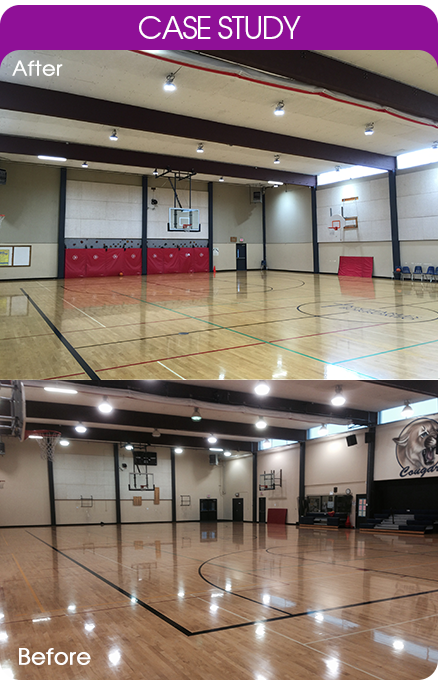
<style>
.page{position:relative;width:440px;height:680px}
.page>*{position:absolute;margin:0}
.t1{font:30px "AvantGarde-Book";letter-spacing:-0.04em;color:#ffffff;text-transform:uppercase}
.t2{font:20.3px "AvantGarde-Book";color:#ffffff;font-weight:bold}
.t3{font:22.3px "AvantGarde-Book";color:#ffffff;font-weight:bold}
</style>
<div class="page">
<p class="t1" style="left:139px;top:16px;width:162px;height:23px">Case study</p>
<p class="t2" style="left:12px;top:60px;width:51px;height:16px">After</p>
<p class="t3" style="left:19px;top:648px;width:72px;height:17px">Before</p>
</div>
